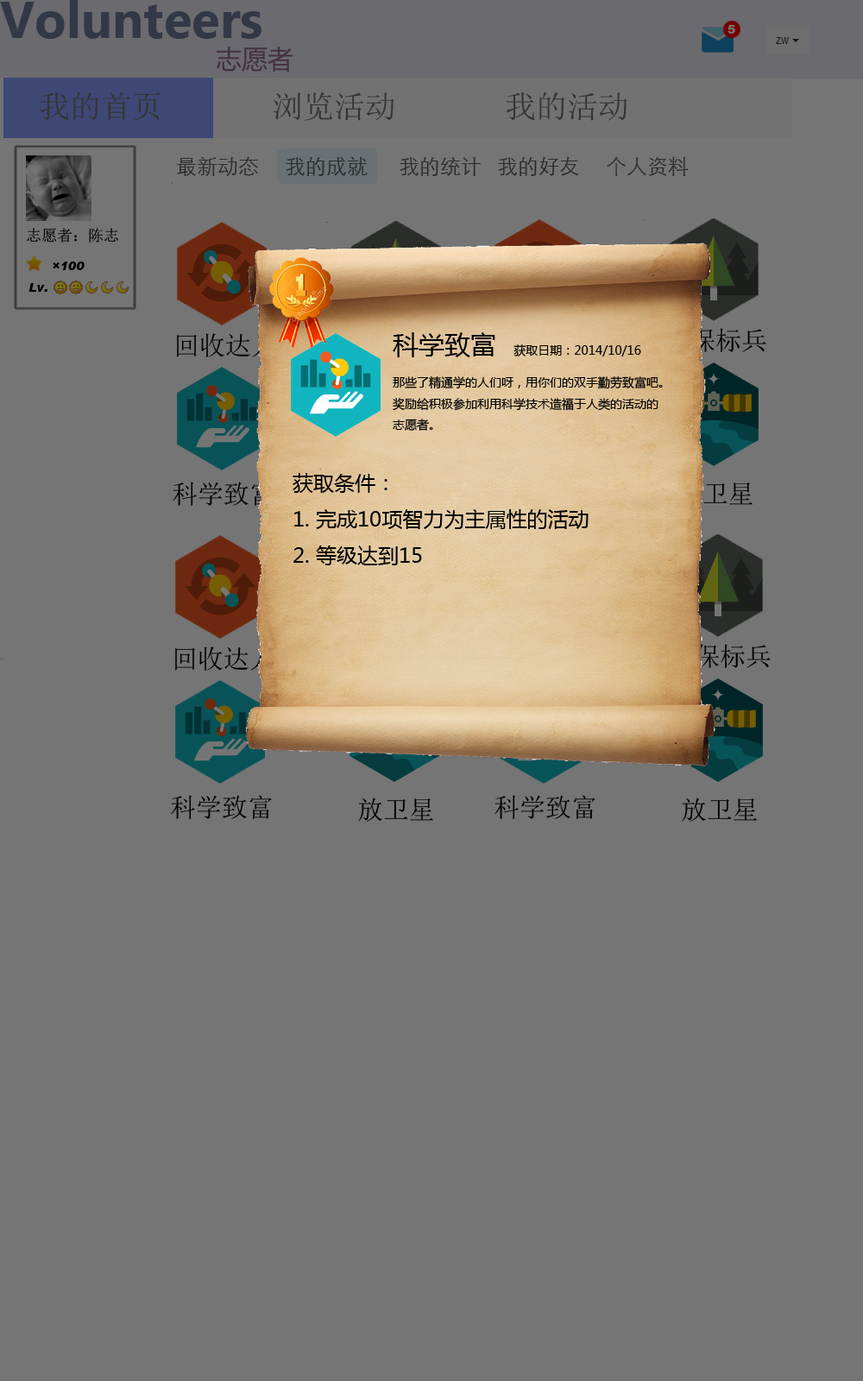
<style>
.page{position:relative;width:863px;height:1381px;background:#757575}
.page>*{position:absolute;margin:0}
.t1{font:12.1px "Arial-Black";color:#757575}
.t2{font:31.1px "SimSun";color:#343435}
.t3{font:20.7px "STXihei";color:#2d2d2d}
.t4{font:15.5px "SimSun";color:#000000}
.t5{font:12.1px "Arial-BlackItalic";color:#000000}
.t6{font:25.9px "SimSun";color:#000000}
.t7{font:12.1px "MicrosoftYaHei";color:#000000}
.t8{font:25.9px "MicrosoftYaHei";color:#000000}
.t9{font:20.7px "MicrosoftYaHei";color:#000000}
.t10{font:25.9px "SimSun"}
</style>
<div class="page">
<p class="t1" style="left:728px;top:25px;width:8px;height:9px">5</p>
<p class="t2" style="left:40px;top:92px;width:588px;height:29px">我的首页       浏览活动       我的活动</p>
<p class="t3" style="left:177px;top:156px;width:512px;height:21px">最新动态     我的成就      我的统计   我的好友     个人资料</p>
<p class="t4" style="left:27px;top:228px;width:91px;height:15px">志愿者：陈志</p>
<p class="t5" style="left:53px;top:262px;width:32px;height:8px">×100</p>
<p class="t5" style="left:28px;top:283px;width:19px;height:9px">Lv.</p>
<p class="t6" style="left:665px;top:328px;width:102px;height:24px">环保标兵</p>
<p class="t6" style="left:177px;top:333px;width:99px;height:24px">回收达人</p>
<p class="t7" style="left:393px;top:332px;width:270px;height:99px"><span class="t8">科学致富<br></span>那些了精通学的人们呀，用你们的双手勤劳致富吧。<br>奖励给积极参加利用科学技术造福于人类的活动的<br>志愿者。</p>
<p class="t7" style="left:514px;top:344px;width:127px;height:13px">获取日期：2014/10/16</p>
<p class="t9" style="left:293px;top:473px;width:296px;height:92px">获取条件：<br>1. 完成10项智力为主属性的活动<br>2. 等级达到15</p>
<p class="t6" style="left:173px;top:482px;width:101px;height:24px">科学致富</p>
<p class="t10" style="left:678px;top:482px;width:75px;height:24px">放卫星</p>
<p class="t6" style="left:175px;top:647px;width:100px;height:24px">回收达人</p>
<p class="t6" style="left:669px;top:644px;width:102px;height:24px">环保标兵</p>
<p class="t6" style="left:171px;top:795px;width:101px;height:24px">科学致富</p>
<p class="t6" style="left:358px;top:798px;width:75px;height:24px">放卫星</p>
<p class="t6" style="left:495px;top:795px;width:101px;height:24px">科学致富</p>
<p class="t6" style="left:682px;top:798px;width:75px;height:24px">放卫星</p>
</div>
